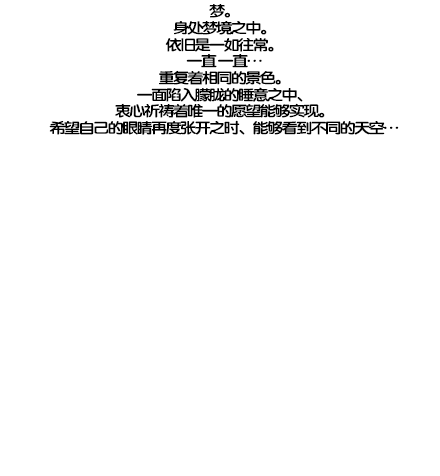
<style>
.page{position:relative;width:440px;height:476px;background:#ffffff}
.page>*{position:absolute;margin:0}
.t1{font:14.7px/16.7px "FZY4K--GBK1-0";letter-spacing:-0.13em;color:#000000;scale:1.14 1}
</style>
<div class="page">
<p class="t1" style="left:49px;top:4px;width:350px;height:131px;text-align:center">梦。<br>身处梦境之中。<br>依旧是一如往常。<br>一直 一直…<br>重复着相同的景色。<br>一面陷入朦胧的睡意之中、<br>衷心祈祷着唯一的愿望能够实现。<br>希望自己的眼睛再度张开之时、能够看到不同的天空…</p>
</div>
